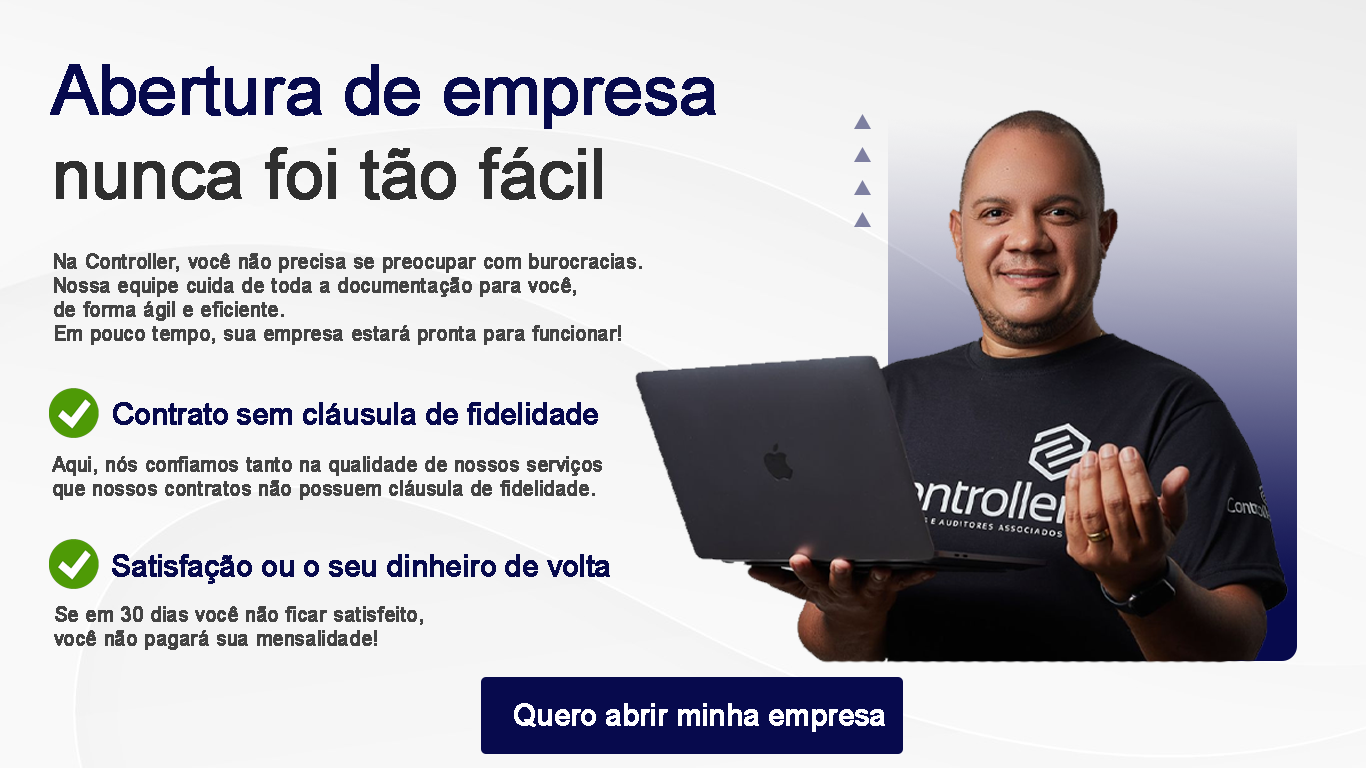
<style>
.page{position:relative;width:1366px;height:768px}
.page>*{position:absolute;margin:0}
.t1{font:70px "ArialMT";letter-spacing:-0.02em;color:#070a4d;font-weight:bold}
.t2{font:70px "ArialMT";letter-spacing:-0.02em;color:#2f2f2f;font-weight:bold}
.t3{font:20px "ArialMT";letter-spacing:-0.02em;color:#444444;font-weight:bold}
.t4{font:30px "ArialMT";letter-spacing:-0.02em;color:#070a4d;font-weight:bold}
.t5{font:30px "ArialMT";letter-spacing:-0.02em;color:#ffffff;font-weight:bold}
</style>
<div class="page">
<p class="t1" style="left:50px;top:64px;width:666px;height:136px">Abertura de empresa<br><span class="t2">nunca foi tão fácil</span></p>
<p class="t3" style="left:54px;top:253px;width:588px;height:92px">Na Controller, você não precisa se preocupar com burocracias.<br>Nossa equipe cuida de toda a documentação para você,<br>de forma ágil e eficiente.<br>Em pouco tempo, sua empresa estará pronta para funcionar!</p>
<p class="t4" style="left:113px;top:402px;width:485px;height:23px">Contrato sem cláusula de fidelidade</p>
<p class="t3" style="left:52px;top:456px;width:550px;height:44px">Aqui, nós confiamos tanto na qualidade de nossos serviços<br>que nossos contratos não possuem cláusula de fidelidade.</p>
<p class="t4" style="left:112px;top:554px;width:498px;height:30px">Satisfação ou o seu dinheiro de volta</p>
<p class="t3" style="left:54px;top:606px;width:369px;height:44px">Se em 30 dias você não ficar satisfeito,<br>você não pagará sua mensalidade!</p>
<p class="t5" style="left:514px;top:703px;width:371px;height:29px">Quero abrir minha empresa</p>
</div>
